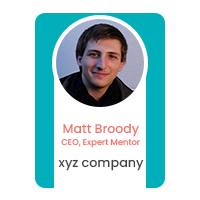
<style>
.page{position:relative;width:200px;height:200px;background:#ffffff}
.page>*{position:absolute;margin:0}
.t1{font:12.5px "Poppins-Medium";color:#f07167}
.t2{font:8.3px "Poppins-Medium";color:#f07167}
.t3{font:12.7px "Poppins-Medium";color:#434242}
</style>
<div class="page">
<p class="t1" style="left:63px;top:123px;width:76px;height:14px">Matt Broody</p>
<p class="t2" style="left:61px;top:139px;width:79px;height:9px">CEO, Expert Mentor</p>
<p class="t3" style="left:58px;top:159px;width:86px;height:12px">xyz company</p>
</div>
